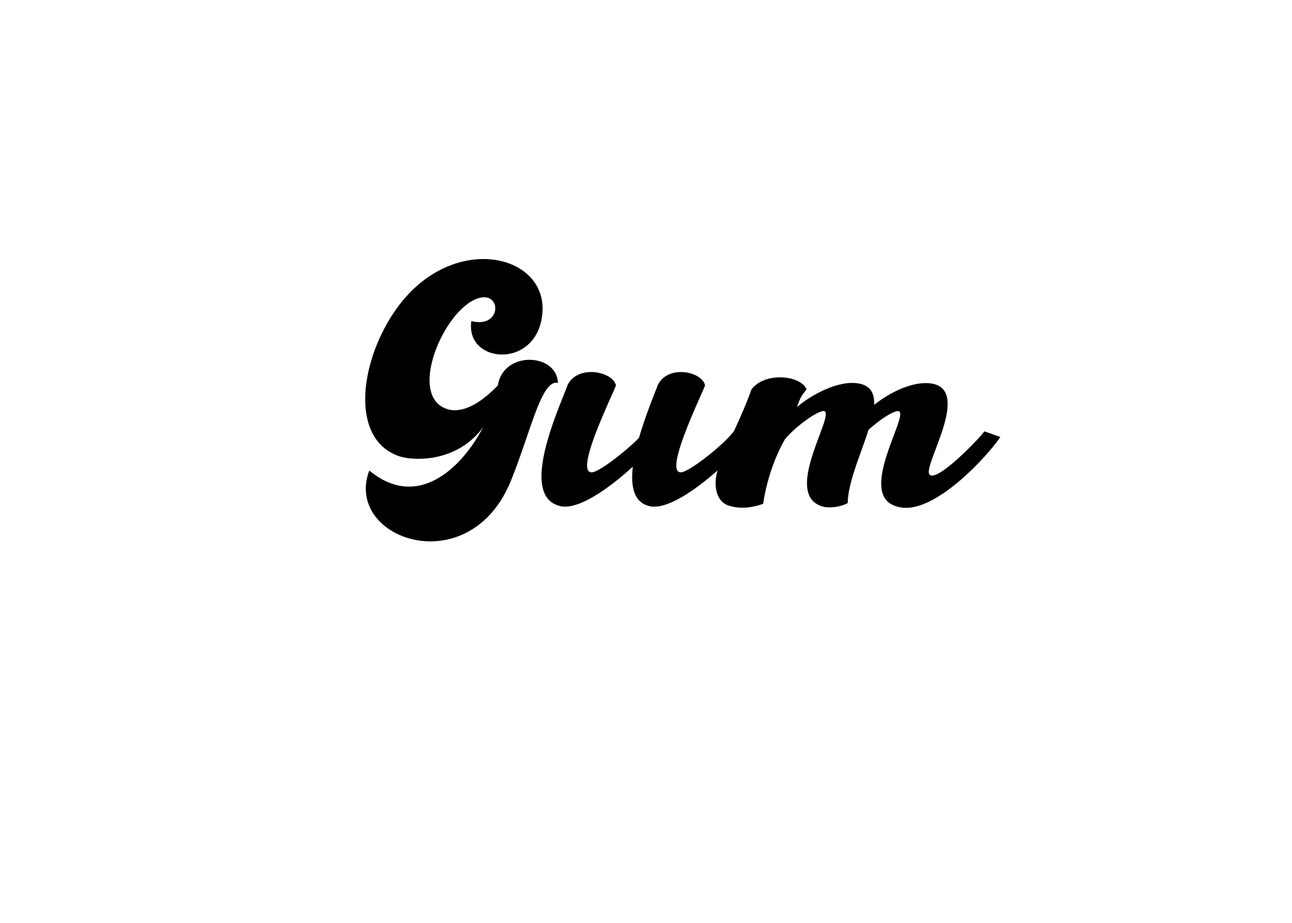
<style>
.page{position:relative;width:1292px;height:923px;background:#ffffff}
.page>*{position:absolute;margin:0}
.t1{font:282px "TheBrandy";color:#000000}
</style>
<div class="page">
<p class="t1" style="left:365px;top:259px;width:635px;height:282px">Gum</p>
</div>
